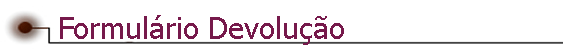
<style>
.page{position:relative;width:563px;height:54px;background:#ffffff}
.page>*{position:absolute;margin:0}
.t1{font:29.5px "Tahoma";color:#76194b}
</style>
<div class="page">
<p class="t1" style="left:60px;top:15px;width:284px;height:30px">Formulário Devolução</p>
</div>
